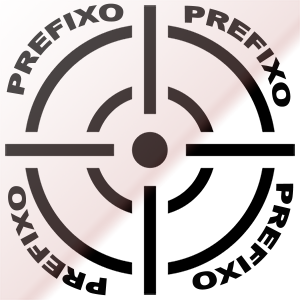
<style>
.page{position:relative;width:300px;height:300px;background:#ffffff}
.page>*{position:absolute;margin:0}
.t1{font:23.7px "Arial-Black";color:#4d4949}
.t2{font:23.7px "Arial-Black"}
.t3{font:23.7px "Arial-Black";color:#040404}
</style>
<div class="page">
<p class="t1" style="left:6px;top:3px;width:118px;height:92px;rotate:-37deg">PREFIXO</p>
<p class="t2" style="left:184px;top:5px;width:107px;height:102px;rotate:43deg">PREFIXO</p>
<p class="t3" style="left:192px;top:183px;width:102px;height:107px;rotate:133deg">PREFIXO</p>
<p class="t2" style="left:8px;top:186px;width:99px;height:110px;rotate:-132deg">PREFIXO</p>
</div>
